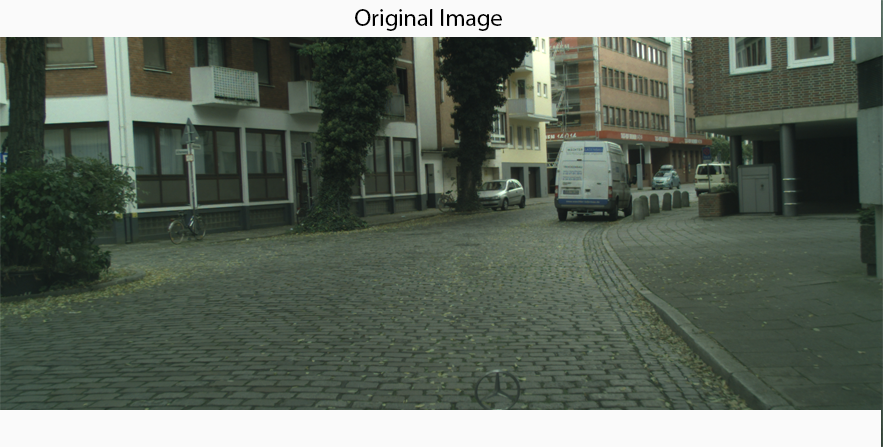
<style>
.page{position:relative;width:883px;height:447px}
.page>*{position:absolute;margin:0}
.t1{font:24px "MyriadPro-Regular";color:#000000}
</style>
<div class="page">
<p class="t1" style="left:355px;top:9px;width:147px;height:22px">Original Image</p>
</div>
